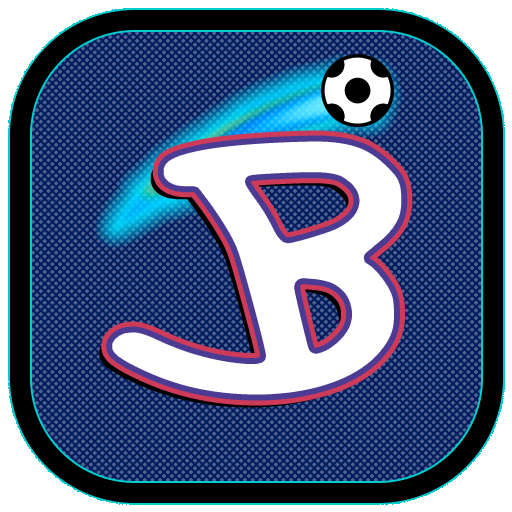
<style>
.page{position:relative;width:512px;height:512px;background:#ffffff}
.page>*{position:absolute;margin:0}
.t1{font:411.8px "Brutal_bounce-Regular";color:#ffffff;scale:1.29 1}
</style>
<div class="page">
<p class="t1" style="left:106px;top:135px;width:302px;height:266px">B</p>
</div>
